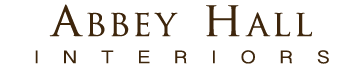
<style>
.page{position:relative;width:356px;height:77px;background:#ffffff}
.page>*{position:absolute;margin:0}
.t1{font:36px "TrajanPro-Regular";letter-spacing:0.075em;color:#3e260c}
.t2{font:48px "TrajanPro-Regular";letter-spacing:0.075em;color:#3e260c}
.t3{font:18px "OriyaSangamMN";letter-spacing:1.1em;color:#3e260c;scale:1.2 1}
</style>
<div class="page">
<p class="t1" style="left:49px;top:4px;width:264px;height:33px"><span class="t2">a</span>bbey <span class="t2">h</span>all</p>
<p class="t3" style="left:35px;top:50px;width:294px;height:14px">INTERIORS</p>
</div>
